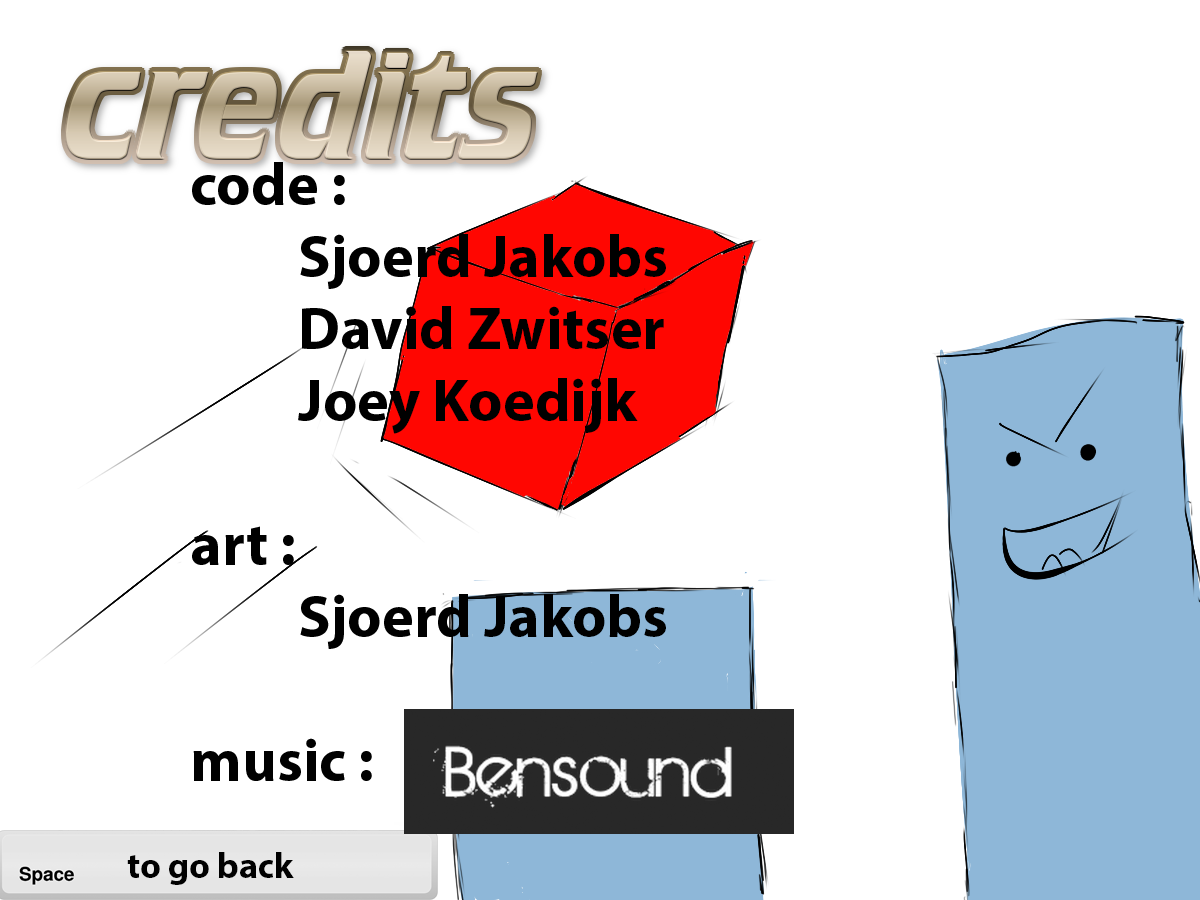
<style>
.page{position:relative;width:1200px;height:900px;background:#ffffff}
.page>*{position:absolute;margin:0}
.t1{font:60px "MyriadPro-Bold";color:#000000}
.t2{font:36px "MyriadPro-Bold";color:#000000}
</style>
<div class="page">
<p class="t1" style="left:192px;top:162px;width:474px;height:619px">code :<br>   Sjoerd Jakobs<br>   David Zwitser<br>   Joey Koedijk<br><br>art :<br>   Sjoerd Jakobs<br><br>music :</p>
<p class="t2" style="left:127px;top:852px;width:167px;height:33px">to go back</p>
</div>
